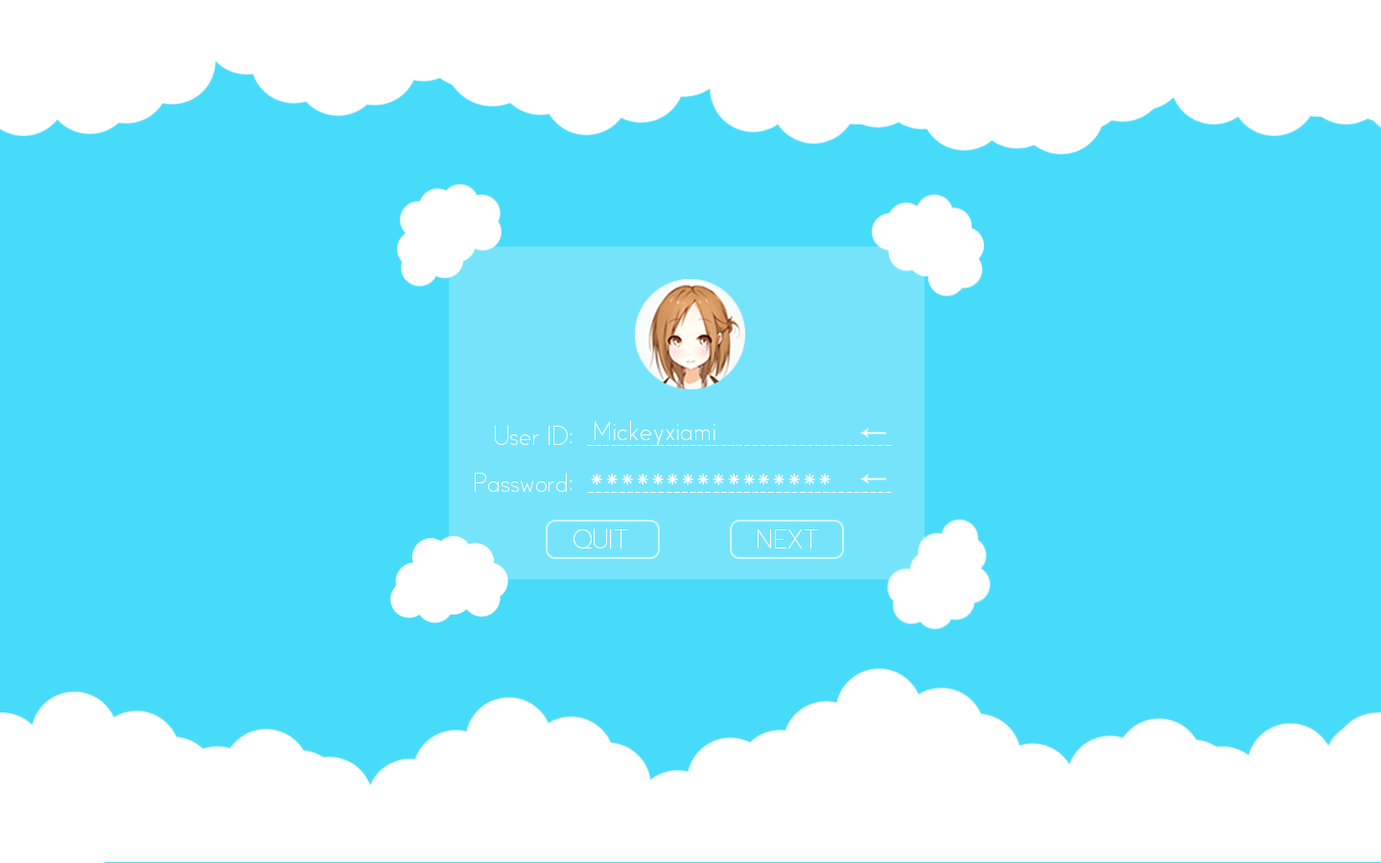
<style>
.page{position:relative;width:1381px;height:863px;background:#47dbfa}
.page>*{position:absolute;margin:0}
.t1{font:24px "Satellite";color:#ffffff}
.t2{font:44px "Satellite";color:#ffffff}
</style>
<div class="page">
<p class="t1" style="left:595px;top:421px;width:121px;height:25px">Mickeyxiami</p>
<p class="t2" style="left:591px;top:474px;width:240px;height:11px">****************</p>
<p class="t1" style="left:574px;top:529px;width:54px;height:20px">QUIT</p>
<p class="t1" style="left:758px;top:529px;width:60px;height:20px">NEXT</p>
</div>
